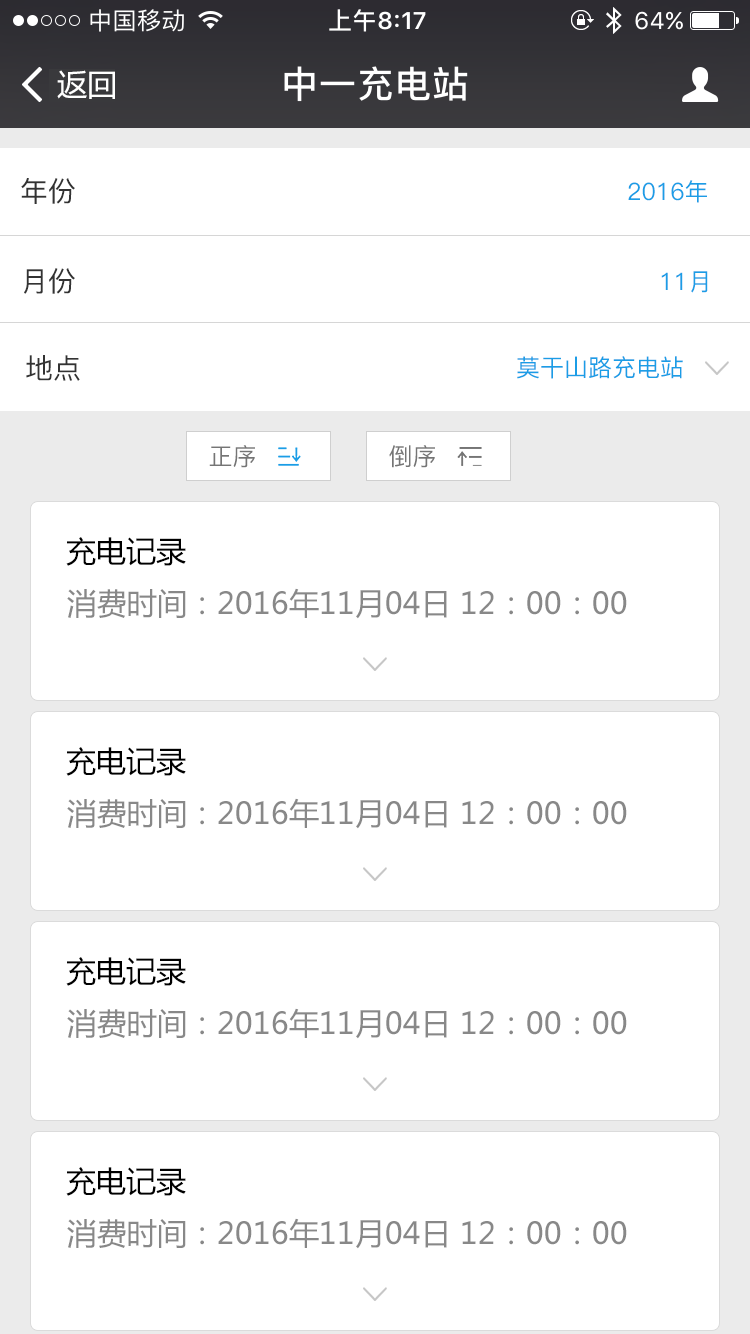
<style>
.page{position:relative;width:750px;height:1334px;background:#ffffff}
.page>*{position:absolute;margin:0}
.t1{font:30px "MicrosoftYaHei";color:#ffffff}
.t2{font:28px "PingFang-SC-Medium";color:#333333}
.t3{font:24px "PingFang-SC-Medium";color:#1b9de6}
.t4{font:24px "PingFang-SC-Medium";color:#757575}
.t5{font:30px "MicrosoftYaHei";color:#000000}
.t6{font:30px "MicrosoftYaHei";color:#888888}
</style>
<div class="page">
<p class="t1" style="left:57px;top:70px;width:58px;height:29px">返回</p>
<p class="t2" style="left:21px;top:178px;width:54px;height:26px">年份</p>
<p class="t3" style="left:628px;top:180px;width:79px;height:23px">2016年</p>
<p class="t2" style="left:24px;top:268px;width:51px;height:26px">月份</p>
<p class="t3" style="left:661px;top:271px;width:47px;height:22px">11月</p>
<p class="t2" style="left:26px;top:355px;width:54px;height:26px">地点</p>
<p class="t3" style="left:517px;top:356px;width:166px;height:23px">莫干山路充电站</p>
<p class="t4" style="left:209px;top:445px;width:46px;height:23px">正序</p>
<p class="t4" style="left:389px;top:445px;width:46px;height:23px">倒序</p>
<p class="t5" style="left:66px;top:537px;width:120px;height:29px">充电记录</p>
<p class="t6" style="left:67px;top:588px;width:560px;height:31px">消费时间：2016年11月04日 12：00：00</p>
<p class="t5" style="left:66px;top:747px;width:120px;height:29px">充电记录</p>
<p class="t6" style="left:67px;top:798px;width:560px;height:31px">消费时间：2016年11月04日 12：00：00</p>
<p class="t5" style="left:66px;top:957px;width:120px;height:29px">充电记录</p>
<p class="t6" style="left:67px;top:1008px;width:560px;height:31px">消费时间：2016年11月04日 12：00：00</p>
<p class="t5" style="left:66px;top:1167px;width:120px;height:29px">充电记录</p>
<p class="t6" style="left:67px;top:1218px;width:560px;height:31px">消费时间：2016年11月04日 12：00：00</p>
</div>
